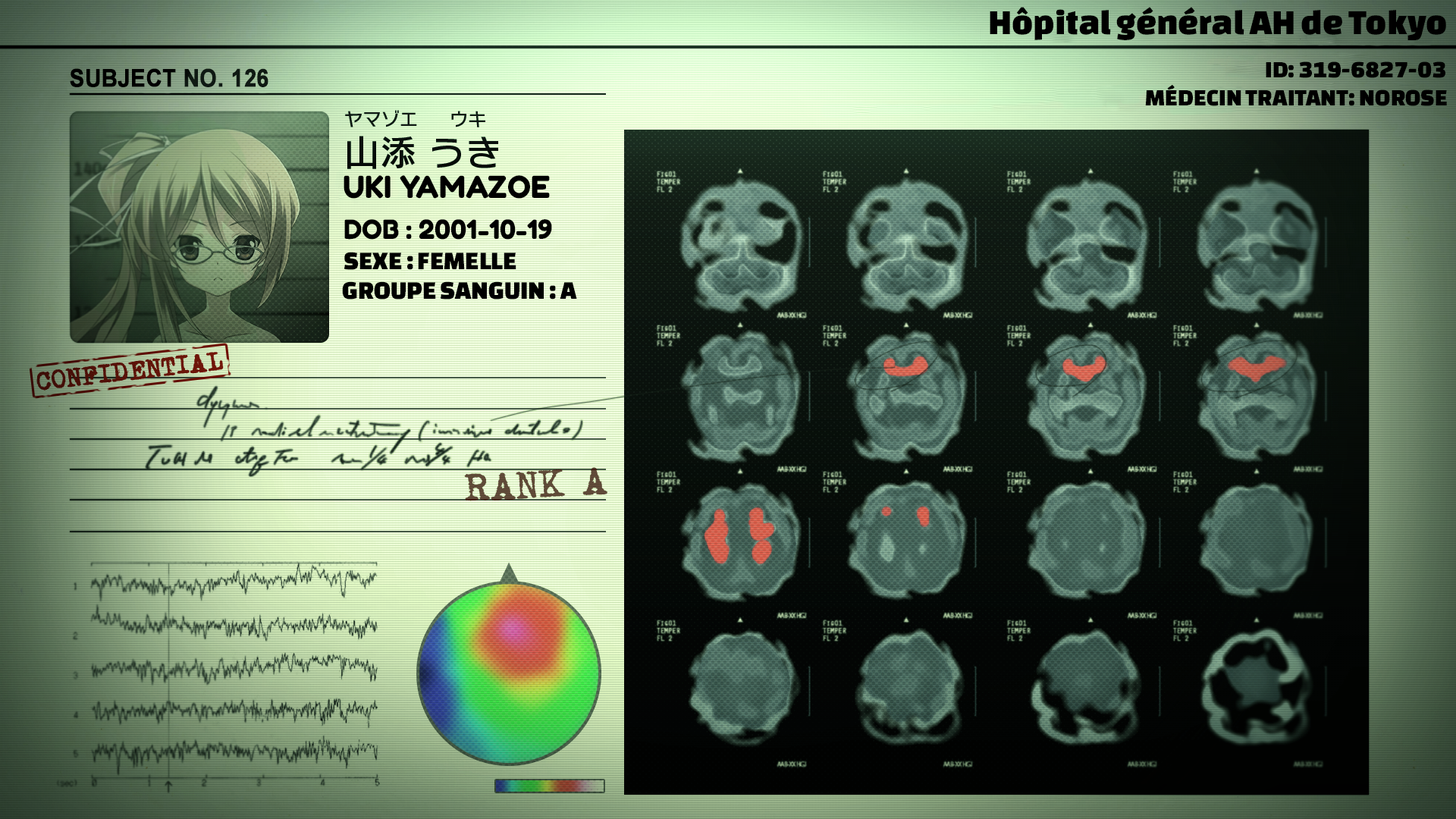
<style>
.page{position:relative;width:1456px;height:819px}
.page>*{position:absolute;margin:0}
.t1{font:36.4px "ChangaOne";color:#000000}
.t2{font:24.3px "ChangaOne";color:#000000}
.t3{font:30.3px "FredokaOne-Regular";color:#000000}
.t4{font:26.3px "FredokaOne-Regular";color:#000000}
.t5{font:26.3px "ChangaOne";color:#000000}
</style>
<div class="page">
<p class="t1" style="left:990px;top:7px;width:456px;height:33px">Hôpital général AH de Tokyo</p>
<p class="t2" style="left:1266px;top:61px;width:179px;height:17px">ID: 319-6827-03</p>
<p class="t2" style="left:1145px;top:84px;width:209px;height:22px">MÉDECIN TRAITANT:</p>
<p class="t2" style="left:1360px;top:89px;width:87px;height:17px">NOROSE</p>
<p class="t3" style="left:344px;top:175px;width:206px;height:24px">UKI YAMAZOE</p>
<p class="t4" style="left:344px;top:219px;width:208px;height:21px">DOB : 2001-10-19</p>
<p class="t5" style="left:344px;top:252px;width:172px;height:18px">SEXE : FEMELLE</p>
<p class="t5" style="left:342px;top:281px;width:235px;height:19px">GROUPE SANGUIN : A</p>
</div>
